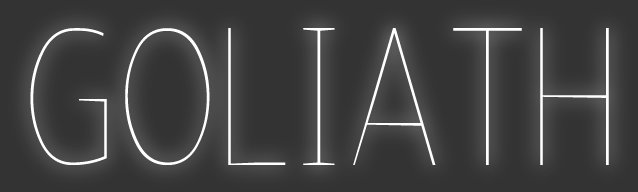
<style>
.page{position:relative;width:638px;height:192px;background:#333333}
.page>*{position:absolute;margin:0}
.t1{font:190px "Birdcherrylite-Regular";color:#ffffff}
</style>
<div class="page">
<p class="t1" style="left:30px;top:28px;width:579px;height:137px">GOLIATH</p>
</div>
